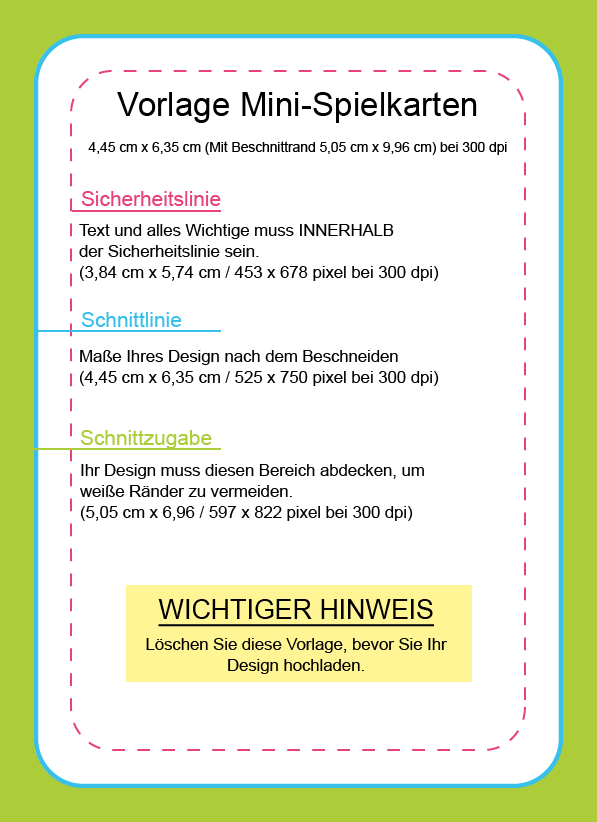
<style>
.page{position:relative;width:597px;height:822px;background:#ffffff}
.page>*{position:absolute;margin:0}
.t1{font:33.3px "ArialMT";color:#000000}
.t2{font:13.8px "ArialMT";color:#000000}
.t3{font:20.8px "ArialMT";color:#e7427c}
.t4{font:16.7px/20.8px "ArialMT";color:#010000}
.t5{font:20.8px "ArialMT";color:#36c0ea}
.t6{font:20.8px "ArialMT";color:#adcc3a}
.t7{font:16.7px/20.8px "ArialMT";color:#020300}
.t8{font:26.8px "ArialMT";color:#000000;text-decoration:underline}
.t9{font:16.7px/20.8px "ArialMT";color:#000000}
</style>
<div class="page">
<p class="t1" style="left:117px;top:92px;width:360px;height:31px">Vorlage Mini-Spielkarten</p>
<p class="t2" style="left:88px;top:141px;width:419px;height:14px">4,45 cm x 6,35 cm (Mit Beschnittrand 5,05 cm x 9,96 cm) bei 300 dpi</p>
<p class="t3" style="left:81px;top:191px;width:140px;height:15px">Sicherheitslinie</p>
<p class="t4" style="left:79px;top:224px;width:360px;height:57px">Text und alles Wichtige muss INNERHALB<br>der Sicherheitslinie sein.<br>(3,84 cm x 5,74 cm / 453 x 678 pixel bei 300 dpi)</p>
<p class="t5" style="left:81px;top:312px;width:101px;height:15px">Schnittlinie</p>
<p class="t4" style="left:79px;top:350px;width:360px;height:36px">Maße Ihres Design nach dem Beschneiden<br>(4,45 cm x 6,35 cm / 525 x 750 pixel bei 300 dpi)</p>
<p class="t6" style="left:80px;top:430px;width:132px;height:19px">Schnittzugabe</p>
<p class="t7" style="left:80px;top:464px;width:344px;height:57px">Ihr Design muss diesen Bereich abdecken, um<br>weiße Ränder zu vermeiden.<br>(5,05 cm x 6,96 / 597 x 822 pixel bei 300 dpi)</p>
<p class="t8" style="left:158px;top:599px;width:276px;height:28px">WICHTIGER HINWEIS</p>
<p class="t9" style="left:146px;top:638px;width:301px;height:36px;text-align:center">Löschen Sie diese Vorlage, bevor Sie Ihr<br>Design hochladen.</p>
</div>
